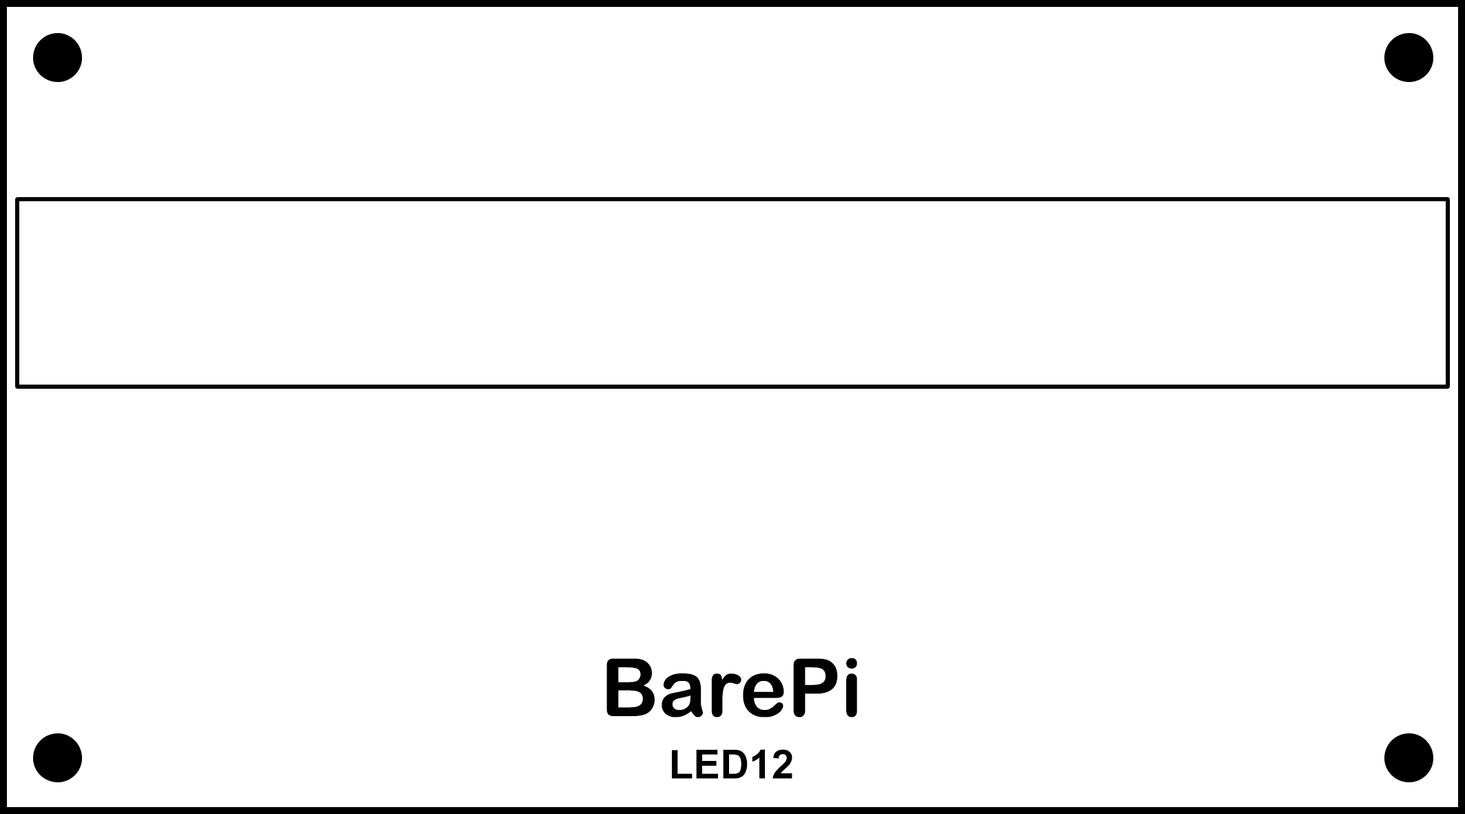
<style>
.page{position:relative;width:1465px;height:814px;background:#ffffff}
.page>*{position:absolute;margin:0}
.t1{font:80.4px "ArialRoundedMTBold";color:#000000}
.t2{font:40.2px "Arial-BoldMT";color:#000000}
</style>
<div class="page">
<p class="t1" style="left:606px;top:657px;width:251px;height:60px">BarePi</p>
<p class="t2" style="left:672px;top:749px;width:121px;height:30px">LED12</p>
</div>
